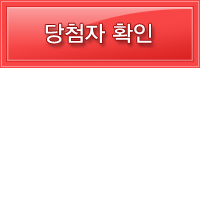
<style>
.page{position:relative;width:200px;height:200px;background:#ffffff}
.page>*{position:absolute;margin:0}
.t1{font:22px "YDIYGO330";color:#ffffff}
</style>
<div class="page">
<p class="t1" style="left:45px;top:23px;width:107px;height:21px">당첨자 확인</p>
</div>
